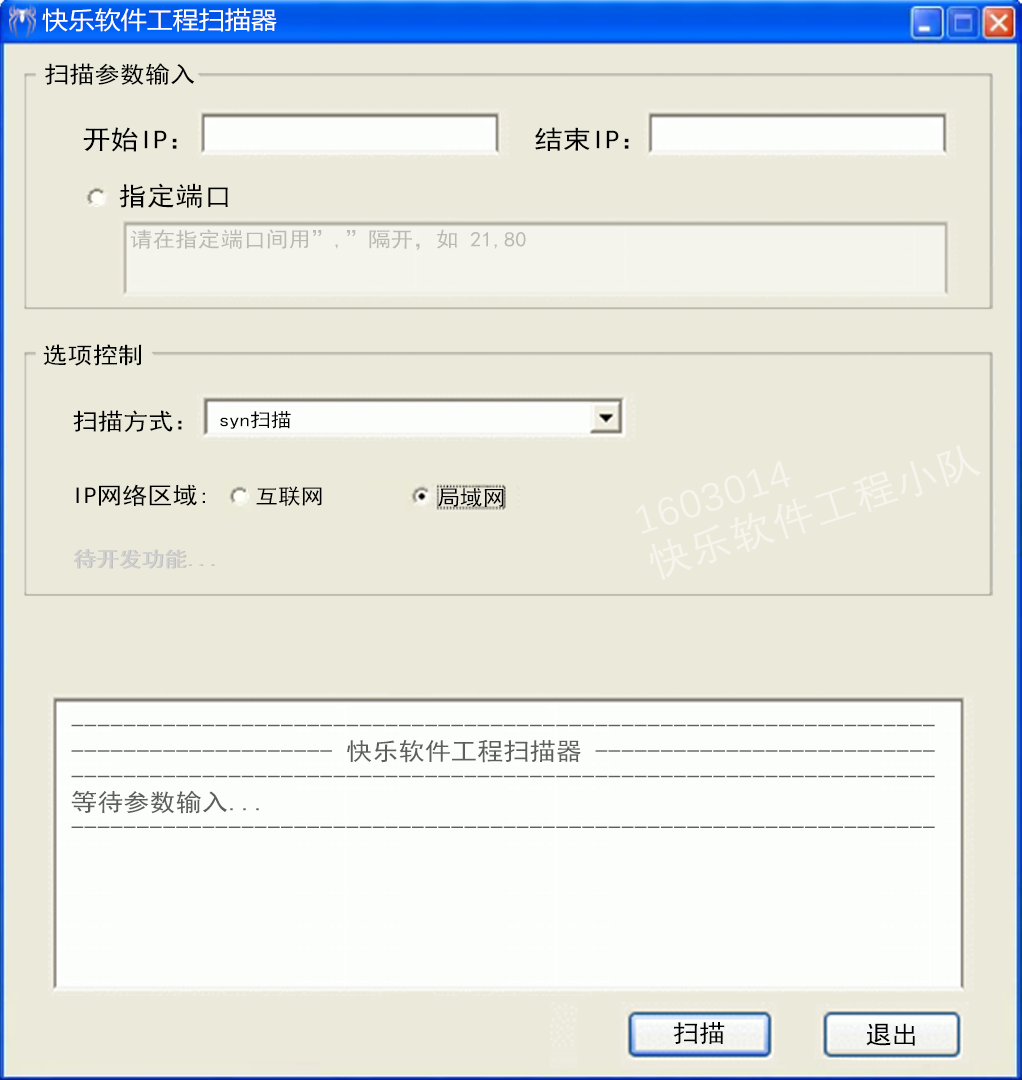
<style>
.page{position:relative;width:1022px;height:1080px;background:#ebe9da}
.page>*{position:absolute;margin:0}
.t1{font:24.1px "MicrosoftYaHeiUI";color:#ffffff;scale:1.08 1}
.t2{font:23.3px "SimHei";color:#000000;scale:1.08 1}
.t3{font:26.3px "SimHei";color:#000000;scale:1.08 1}
.t4{font:26.2px "SimHei";color:#000000;scale:1.08 1}
.t5{font:20.9px "SimHei";color:#bab9b2;scale:1.08 1}
.t6{font:19.1px "SimHei";color:#000000;scale:1.08 1}
.t7{font:21px "SimHei";color:#000000;scale:1.08 1}
.t8{font:21px "SimHei";color:#d1d0d0;scale:1.08 1}
.t9{font:21px "SimHei";color:#c0c0c0;scale:1.08 1}
.t10{font:24.2px/25.4px "SimHei";color:#5e5e5e;scale:1.08 1}
.t11{font:24.2px "SimHei";color:#000000;scale:1.08 1}
</style>
<div class="page">
<p class="t1" style="left:42px;top:8px;width:235px;height:24px">快乐软件工程扫描器</p>
<p class="t2" style="left:45px;top:63px;width:150px;height:22px">扫描参数输入</p>
<p class="t3" style="left:83px;top:127px;width:94px;height:25px">开始IP：</p>
<p class="t3" style="left:535px;top:127px;width:94px;height:24px">结束IP：</p>
<p class="t4" style="left:119px;top:183px;width:109px;height:25px">指定端口</p>
<p class="t5" style="left:130px;top:229px;width:396px;height:21px">请在指定端口间用”,”隔开，如 21,80</p>
<p class="t2" style="left:43px;top:344px;width:99px;height:22px">选项控制</p>
<p class="t2" style="left:73px;top:410px;width:109px;height:22px">扫描方式：</p>
<p class="t6" style="left:220px;top:411px;width:71px;height:18px">syn扫描</p>
<p class="t2" style="left:76px;top:484px;width:129px;height:22px">IP网络区域:：</p>
<p class="t7" style="left:256px;top:486px;width:66px;height:20px">互联网</p>
<p class="t7" style="left:438px;top:488px;width:66px;height:19px">局域网</p>
<p class="t8" style="left:73px;top:549px;width:140px;height:20px">待开发功能...</p>
<p class="t9" style="left:75px;top:549px;width:140px;height:20px">待开发功能...</p>
<p class="t10" style="left:71px;top:724px;width:864px;height:104px">------------------------------------------------------------------<br>-------------------- 快乐软件工程扫描器 --------------------------<br>------------------------------------------------------------------<br>等待参数输入...<br>------------------------------------------------------------------</p>
<p class="t11" style="left:673px;top:1022px;width:52px;height:22px">扫描</p>
<p class="t11" style="left:866px;top:1023px;width:49px;height:23px">退出</p>
</div>
